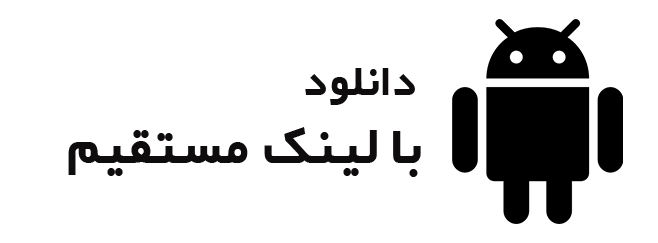
<style>
.page{position:relative;width:658px;height:243px;background:#ffffff}
.page>*{position:absolute;margin:0}
.t1{font:37.5px "IRYekan-Bold";color:#0e0c0c}
.t2{font:45.8px "IRYekan-Bold";color:#0e0c0c}
</style>
<div class="page">
<p class="t1" style="left:305px;top:68px;width:110px;height:37px">دانلود</p>
<p class="t2" style="left:68px;top:127px;width:353px;height:50px">با لینک مستقیم</p>
</div>
